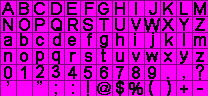
<style>
.page{position:relative;width:208px;height:96px;background:#ff00ff}
.page>*{position:absolute;margin:0}
.t1{font:17.3px "ArialMT";letter-spacing:0.01em;color:#000000;font-weight:bold}
.t2{font:17.7px "ArialMT";letter-spacing:0.01em;color:#000000;font-weight:bold;scale:0.86 1}
.t3{font:13.7px "ArialMT";letter-spacing:0.01em;color:#000000;font-weight:bold}
</style>
<div class="page">
<p class="t1" style="left:2px;top:2px;width:12px;height:13px">A</p>
<p class="t1" style="left:19px;top:2px;width:10px;height:13px">B</p>
<p class="t1" style="left:34px;top:2px;width:11px;height:13px">C</p>
<p class="t1" style="left:51px;top:2px;width:11px;height:13px">D</p>
<p class="t1" style="left:67px;top:2px;width:10px;height:13px">E</p>
<p class="t1" style="left:85px;top:2px;width:9px;height:13px">F</p>
<p class="t1" style="left:98px;top:2px;width:11px;height:13px">G</p>
<p class="t1" style="left:115px;top:2px;width:10px;height:13px">H</p>
<p class="t1" style="left:149px;top:2px;width:8px;height:13px">J</p>
<p class="t1" style="left:163px;top:2px;width:10px;height:13px">K</p>
<p class="t1" style="left:180px;top:2px;width:8px;height:13px">L</p>
<p class="t1" style="left:194px;top:2px;width:12px;height:13px">M</p>
<p class="t1" style="left:3px;top:18px;width:10px;height:13px">N</p>
<p class="t1" style="left:19px;top:18px;width:11px;height:13px">O</p>
<p class="t1" style="left:35px;top:18px;width:10px;height:13px">P</p>
<p class="t1" style="left:51px;top:18px;width:11px;height:13px">Qvv</p>
<p class="t1" style="left:68px;top:18px;width:10px;height:13px">R</p>
<p class="t1" style="left:83px;top:18px;width:10px;height:13px">S</p>
<p class="t1" style="left:99px;top:18px;width:10px;height:13px">T</p>
<p class="t1" style="left:115px;top:18px;width:10px;height:13px">U</p>
<p class="t1" style="left:131px;top:18px;width:10px;height:13px">V</p>
<p class="t2" style="left:144px;top:18px;width:16px;height:14px">W</p>
<p class="t1" style="left:162px;top:18px;width:12px;height:13px">X</p>
<p class="t1" style="left:179px;top:18px;width:10px;height:13px">Y</p>
<p class="t1" style="left:195px;top:18px;width:10px;height:13px">Z</p>
<p class="t1" style="left:4px;top:36px;width:8px;height:10px">a</p>
<p class="t1" style="left:20px;top:33px;width:8px;height:13px">b</p>
<p class="t1" style="left:36px;top:36px;width:8px;height:10px">c</p>
<p class="t1" style="left:53px;top:33px;width:8px;height:13px">d</p>
<p class="t1" style="left:87px;top:33px;width:5px;height:13px">f</p>
<p class="t1" style="left:100px;top:35px;width:8px;height:13px">g</p>
<p class="t1" style="left:116px;top:33px;width:8px;height:13px">h</p>
<p class="t1" style="left:134px;top:33px;width:2px;height:13px">i</p>
<p class="t1" style="left:150px;top:32px;width:4px;height:16px">j</p>
<p class="t1" style="left:165px;top:33px;width:8px;height:13px">k</p>
<p class="t1" style="left:194px;top:36px;width:12px;height:10px">m</p>
<p class="t1" style="left:4px;top:52px;width:8px;height:10px">n</p>
<p class="t1" style="left:20px;top:52px;width:8px;height:10px">o</p>
<p class="t1" style="left:36px;top:51px;width:8px;height:13px">p</p>
<p class="t1" style="left:52px;top:51px;width:8px;height:13px">q</p>
<p class="t1" style="left:70px;top:52px;width:6px;height:10px">r</p>
<p class="t1" style="left:85px;top:52px;width:7px;height:10px">s</p>
<p class="t1" style="left:101px;top:49px;width:5px;height:13px">t</p>
<p class="t1" style="left:116px;top:52px;width:8px;height:10px">u</p>
<p class="t1" style="left:132px;top:52px;width:8px;height:10px">v</p>
<p class="t1" style="left:146px;top:52px;width:12px;height:10px">w</p>
<p class="t1" style="left:180px;top:51px;width:8px;height:13px">y</p>
<p class="t1" style="left:196px;top:52px;width:8px;height:10px">z</p>
<p class="t1" style="left:36px;top:65px;width:8px;height:13px">2</p>
<p class="t1" style="left:52px;top:65px;width:8px;height:13px">3</p>
<p class="t1" style="left:4px;top:66px;width:8px;height:13px">0</p>
<p class="t1" style="left:21px;top:66px;width:5px;height:13px">1</p>
<p class="t1" style="left:68px;top:66px;width:9px;height:13px">4</p>
<p class="t1" style="left:84px;top:66px;width:8px;height:13px">5</p>
<p class="t1" style="left:100px;top:66px;width:8px;height:13px">6</p>
<p class="t1" style="left:116px;top:66px;width:8px;height:13px">7</p>
<p class="t1" style="left:132px;top:66px;width:8px;height:13px">8</p>
<p class="t1" style="left:148px;top:66px;width:8px;height:13px">9</p>
<p class="t1" style="left:55px;top:84px;width:2px;height:12px">;</p>
<p class="t1" style="left:72px;top:84px;width:2px;height:10px">:</p>
<p class="t3" style="left:97px;top:82px;width:14px;height:13px">@</p>
<p class="t1" style="left:116px;top:80px;width:8px;height:16px">$</p>
<p class="t1" style="left:129px;top:82px;width:14px;height:13px">%</p>
<p class="t1" style="left:149px;top:80px;width:4px;height:16px">(</p>
<p class="t1" style="left:167px;top:80px;width:4px;height:16px">)</p>
<p class="t1" style="left:180px;top:85px;width:8px;height:8px">+</p>
</div>
